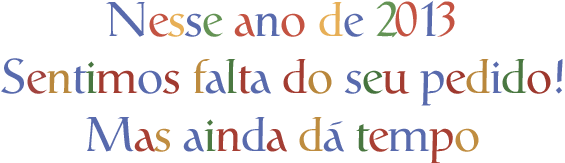
<style>
.page{position:relative;width:565px;height:163px;background:#ffffff}
.page>*{position:absolute;margin:0}
.t1{font:48px "Catull-Regular";letter-spacing:-0.02em;color:#586aad}
.t2{font:48px "Catull-Regular";letter-spacing:-0.02em;color:#c35342}
.t3{font:48px "Catull-Regular";letter-spacing:-0.02em;color:#e7af56}
.t4{font:48px "Catull-Regular";letter-spacing:-0.02em;color:#649354}
.t5{font:48px "Catull-Regular";letter-spacing:-0.02em;color:#c45342}
.t6{font:48px "Catull-Regular";letter-spacing:-0.02em;color:#639354}
.t7{font:48px "Catull-Regular";letter-spacing:-0.02em;color:#a1433e}
.t8{font:48px "Catull-Regular";letter-spacing:-0.02em;color:#b9883d}
.t9{font:48px "Catull-Regular";letter-spacing:-0.02em;color:#487640}
.t10{font:48px "Catull-Regular";letter-spacing:-0.02em;color:#a23b30}
.t11{font:48px "Catull-Regular";letter-spacing:-0.02em;color:#a13a30}
.t12{font:48px "Catull-Regular";letter-spacing:-0.02em;color:#bd8b3e}
.t13{font:48px "Catull-Regular";letter-spacing:-0.02em;color:#4b7941}
.t14{font:48px "Catull-Regular";letter-spacing:-0.02em;color:#a33d31}
.t15{font:48px "Catull-Regular";letter-spacing:-0.02em;color:#a33c31}
.t16{font:48px "Catull-Regular";letter-spacing:-0.02em;color:#b8873c}
.t17{font:48px "Catull-Regular";letter-spacing:-0.02em;color:#46743e}
.t18{font:48px "Catull-Regular";letter-spacing:-0.02em;color:#9e382e}
.t19{font:48px "Catull-Regular";letter-spacing:-0.02em;color:#b9873c}
.t20{font:48px "Catull-Regular";letter-spacing:-0.02em;color:#4a7841}
.t21{font:48px "Catull-Regular";letter-spacing:-0.02em;color:#a84034}
.t22{font:48px "Catull-Regular";letter-spacing:-0.02em;color:#c08d41}
.t23{font:48px "Catull-Regular";letter-spacing:-0.02em;color:#4c7a42}
.t24{font:48px "Catull-Regular";letter-spacing:-0.02em;color:#a63e33}
.t25{font:48px "Catull-Regular";letter-spacing:-0.02em;color:#a33e35}
.t26{font:48px "Catull-Regular";letter-spacing:-0.02em;color:#be8c3f}
.t27{font:48px "Catull-Regular";letter-spacing:-0.02em;color:#497740}
.t28{font:48px "Catull-Regular";letter-spacing:-0.02em;color:#a94034}
.t29{font:48px "Catull-Regular";letter-spacing:-0.02em;color:#a73f33}
.t30{font:48px "Catull-Regular";letter-spacing:-0.02em;color:#c08d40}
</style>
<div class="page">
<p class="t1" style="left:1px;top:0px;width:562px;height:164px;text-align:center">N<span class="t2">e</span><span class="t3">s</span>s<span class="t4">e </span><span class="t5">a</span>n<span class="t5">o </span><span class="t3">d</span>e <span class="t6">2</span><span class="t5">0</span>1<span class="t5">3<br></span>S<span class="t7">e</span><span class="t8">n</span>t<span class="t9">i</span><span class="t10">m</span>o<span class="t11">s </span><span class="t12">f</span>a<span class="t13">l</span><span class="t14">t</span>a <span class="t15">d</span><span class="t16">o</span> s<span class="t17">e</span><span class="t15">u</span> p<span class="t18">e</span><span class="t19">d</span>i<span class="t20">d</span><span class="t18">o</span>!<br>M<span class="t21">a</span><span class="t22">s</span> a<span class="t23">i</span><span class="t24">n</span>d<span class="t25">a </span><span class="t26">d</span>á <span class="t27">t</span><span class="t28">e</span>m<span class="t29">p</span><span class="t30">o</span></p>
</div>
